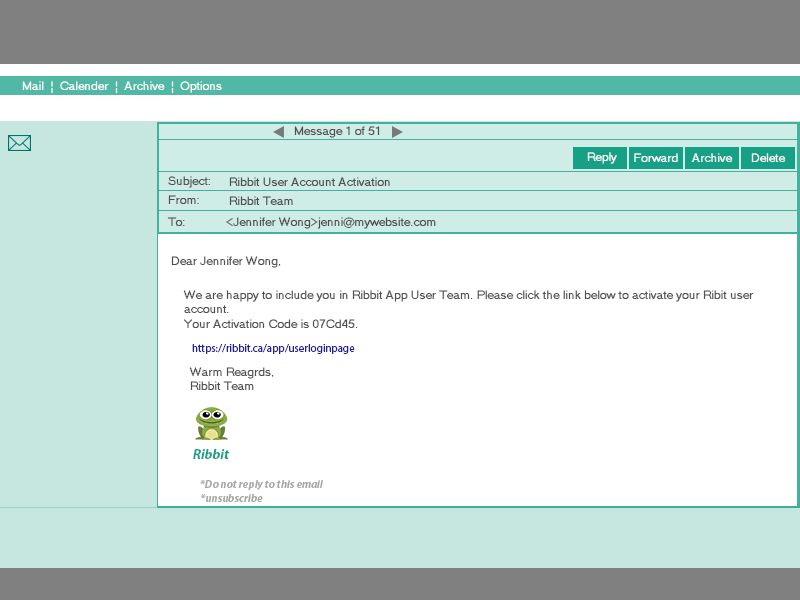
<style>
.page{position:relative;width:800px;height:600px;background:#ffffff}
.page>*{position:absolute;margin:0}
.t1{font:12px "MS Sans Serif";color:#ffffff}
.t2{font:12px "MS Sans Serif";color:#524f4f}
.t3{font:12px "MS Sans Serif";color:#4f4d4d}
.t4{font:12px "MS Sans Serif";color:#504e4e}
.t5{font:11px "MyriadPro-Regular";color:#251f9e}
.t6{font:14px "MyriadPro-BoldIt";color:#16a085}
.t7{font:11px "MyriadPro-BoldIt";color:#a5a6a6}
</style>
<div class="page">
<p class="t1" style="left:22px;top:81px;width:200px;height:12px">Mail  |  Calender  |  Archive  |  Options</p>
<p class="t2" style="left:294px;top:126px;width:86px;height:12px">Message 1 of 51</p>
<p class="t1" style="left:587px;top:152px;width:30px;height:12px">Reply</p>
<p class="t1" style="left:634px;top:153px;width:44px;height:9px">Forward</p>
<p class="t1" style="left:691px;top:153px;width:42px;height:9px">Archive</p>
<p class="t1" style="left:751px;top:153px;width:35px;height:9px">Delete</p>
<p class="t3" style="left:168px;top:176px;width:42px;height:12px">Subject:</p>
<p class="t3" style="left:229px;top:177px;width:161px;height:9px">Ribbit User Account Activation</p>
<p class="t3" style="left:168px;top:195px;width:31px;height:9px">From:</p>
<p class="t3" style="left:229px;top:196px;width:64px;height:9px">Ribbit Team</p>
<p class="t3" style="left:167px;top:217px;width:18px;height:9px">To:</p>
<p class="t3" style="left:226px;top:217px;width:210px;height:12px">&lt;Jennifer Wong&gt;jenni@mywebsite.com</p>
<p class="t4" style="left:171px;top:256px;width:110px;height:12px">Dear Jennifer Wong,</p>
<p class="t4" style="left:183px;top:290px;width:571px;height:38px">We are happy to include you in Ribbit App User Team. Please click the link below to activate your Ribit user account.<br>Your Activation Code is 07Cd45.</p>
<p class="t5" style="left:192px;top:344px;width:163px;height:10px">https://ribbit.ca/app/userloginpage</p>
<p class="t4" style="left:189px;top:367px;width:85px;height:23px">Warm Reagrds,<br>Ribbit Team</p>
<p class="t6" style="left:193px;top:449px;width:37px;height:10px">Ribbit</p>
<p class="t7" style="left:200px;top:480px;width:123px;height:10px">*Do not reply to this email</p>
<p class="t7" style="left:201px;top:494px;width:62px;height:8px">*unsubscribe</p>
</div>
